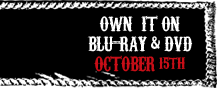
<style>
.page{position:relative;width:217px;height:88px;background:#000000}
.page>*{position:absolute;margin:0}
.t1{font:20px/20px "CarnivaleeFreakshow";letter-spacing:-0.035em;color:#ffffff;scale:0.95 1}
.t2{font:20px/20px "CarnivaleeFreakshow";letter-spacing:-0.035em;color:#c90e17;scale:0.95 1}
</style>
<div class="page">
<p class="t1" style="left:87px;top:15px;width:106px;height:57px;text-align:center">OWN  IT ON<br>BLU-RAY &amp; DVD<br><span class="t2">OCTOBER 15th</span></p>
</div>
